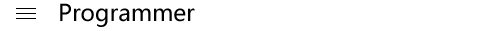
<style>
.page{position:relative;width:500px;height:31px;background:#ffffff}
.page>*{position:absolute;margin:0}
.t1{font:22.7px "MicrosoftYaHeiUI";color:#000000}
</style>
<div class="page">
<p class="t1" style="left:60px;top:3px;width:135px;height:24px">Programmer</p>
</div>
